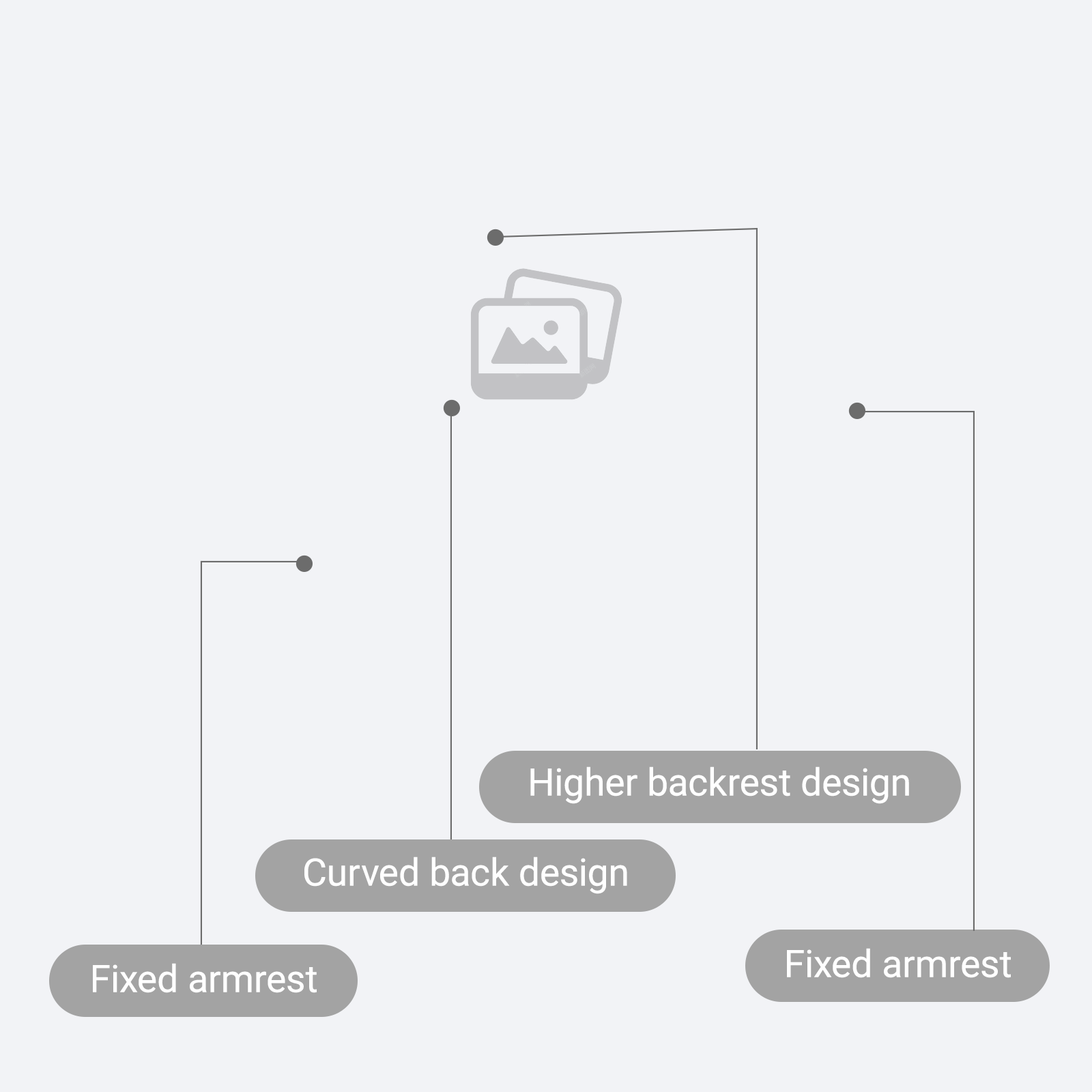
<style>
.page{position:relative;width:1092px;height:1092px;background:#f2f3f6}
.page>*{position:absolute;margin:0}
.t1{font:37.9px "Roboto-Regular";color:#ffffff}
</style>
<div class="page">
<p class="t1" style="left:530px;top:766px;width:379px;height:38px">Higher backrest design</p>
<p class="t1" style="left:304px;top:857px;width:323px;height:37px">Curved back design</p>
<p class="t1" style="left:787px;top:948px;width:224px;height:30px">Fixed armrest</p>
<p class="t1" style="left:93px;top:963px;width:224px;height:30px">Fixed armrest</p>
</div>
